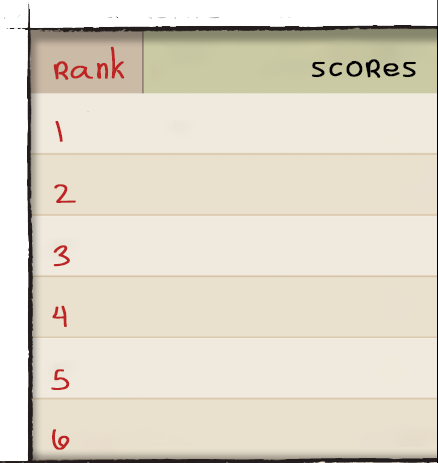
<style>
.page{position:relative;width:438px;height:463px;background:#f0eade}
.page>*{position:absolute;margin:0}
.t1{font:41.7px "DoodleJump";color:#bf2424;font-weight:bold}
.t2{font:41.7px "DoodleJump";color:#000000;font-weight:bold}
</style>
<div class="page">
<p class="t1" style="left:53px;top:46px;width:72px;height:34px">rank</p>
<p class="t2" style="left:311px;top:59px;width:105px;height:19px">scores</p>
<p class="t1" style="left:55px;top:121px;width:8px;height:21px">1</p>
<p class="t1" style="left:54px;top:184px;width:22px;height:19px">2</p>
<p class="t1" style="left:53px;top:245px;width:17px;height:22px">3</p>
<p class="t1" style="left:52px;top:305px;width:15px;height:22px">4</p>
<p class="t1" style="left:51px;top:369px;width:19px;height:21px">5</p>
<p class="t1" style="left:52px;top:429px;width:18px;height:21px">6</p>
</div>
